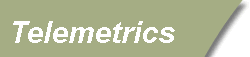
<style>
.page{position:relative;width:250px;height:57px;background:#a5ad84}
.page>*{position:absolute;margin:0}
.t1{font:30px "Arial-BoldItalicMT";color:#ffffff}
</style>
<div class="page">
<p class="t1" style="left:13px;top:21px;width:162px;height:22px">Telemetrics</p>
</div>
